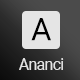
<style>
.page{position:relative;width:80px;height:80px;background:#e5e5e5}
.page>*{position:absolute;margin:0}
.t1{font:31.1px "Roboto-Regular";letter-spacing:-0.05em;color:#000000}
.t2{font:16.1px "Roboto-Regular";letter-spacing:-0.05em;color:#e5e5e5}
</style>
<div class="page">
<p class="t1" style="left:31px;top:18px;width:20px;height:23px">A</p>
<p class="t2" style="left:19px;top:58px;width:45px;height:12px">Ananci</p>
</div>
